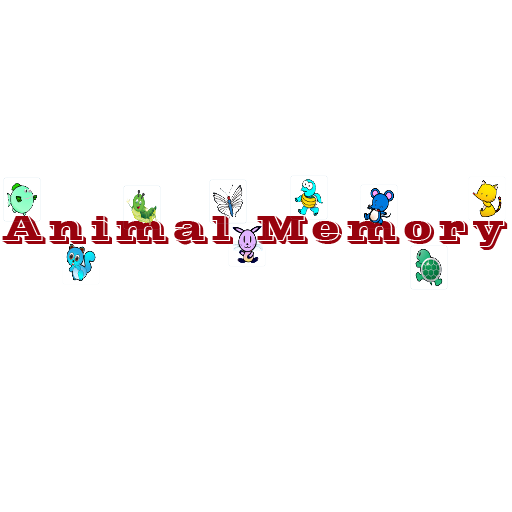
<style>
.page{position:relative;width:512px;height:512px;background:#ffffff}
.page>*{position:absolute;margin:0}
.t1{font:36px "VinetaBT-Regular";letter-spacing:0.1em;color:#98020d}
</style>
<div class="page">
<p class="t1" style="left:2px;top:216px;width:506px;height:34px">Animal Memory</p>
</div>
